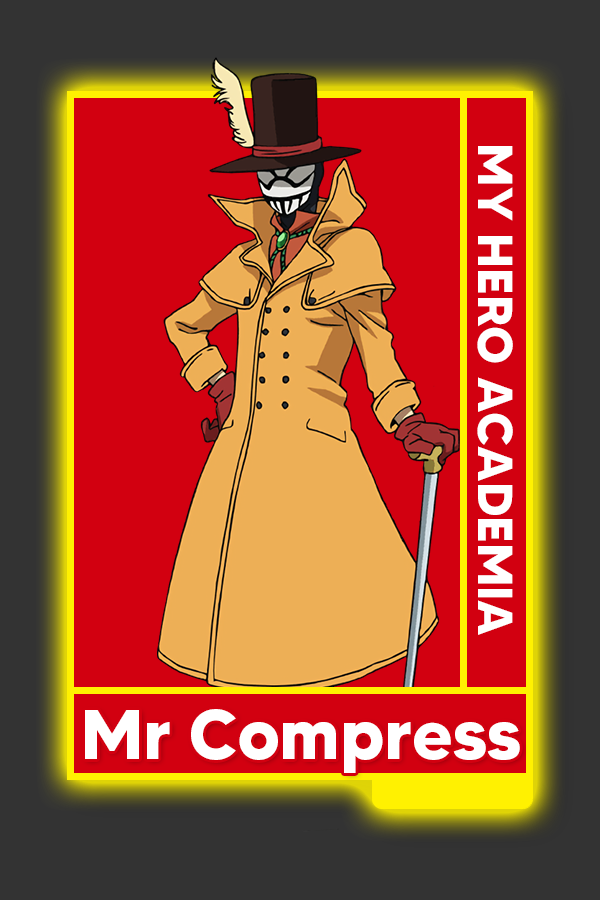
<style>
.page{position:relative;width:600px;height:900px;background:#d20010}
.page>*{position:absolute;margin:0}
.t1{font:48.8px "MADETOMMY-Bold";color:#ffffff}
.t2{font:70.1px "MADETOMMY-Bold";color:#ffffff}
</style>
<div class="page">
<p class="t1" style="left:477px;top:146px;width:36px;height:489px;rotate:90deg">MY HERO ACADEMIA</p>
<p class="t2" style="left:85px;top:709px;width:435px;height:64px">Mr Compress</p>
</div>
